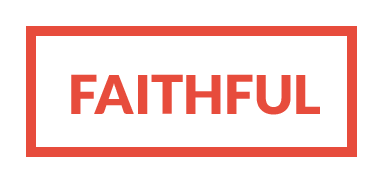
<style>
.page{position:relative;width:384px;height:180px;background:#ffffff}
.page>*{position:absolute;margin:0}
.t1{font:53.7px "Lato-Black";color:#e74c3c}
</style>
<div class="page">
<p class="t1" style="left:71px;top:74px;width:249px;height:41px">FAITHFUL</p>
</div>
